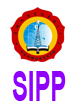
<style>
.page{position:relative;width:77px;height:110px;background:#ffffff}
.page>*{position:absolute;margin:0}
.t1{font:42.4px "Arial-BoldMT";color:#9000ff;scale:0.56 1}
</style>
<div class="page">
<p class="t1" style="left:12px;top:71px;width:54px;height:30px">SIPP</p>
</div>
